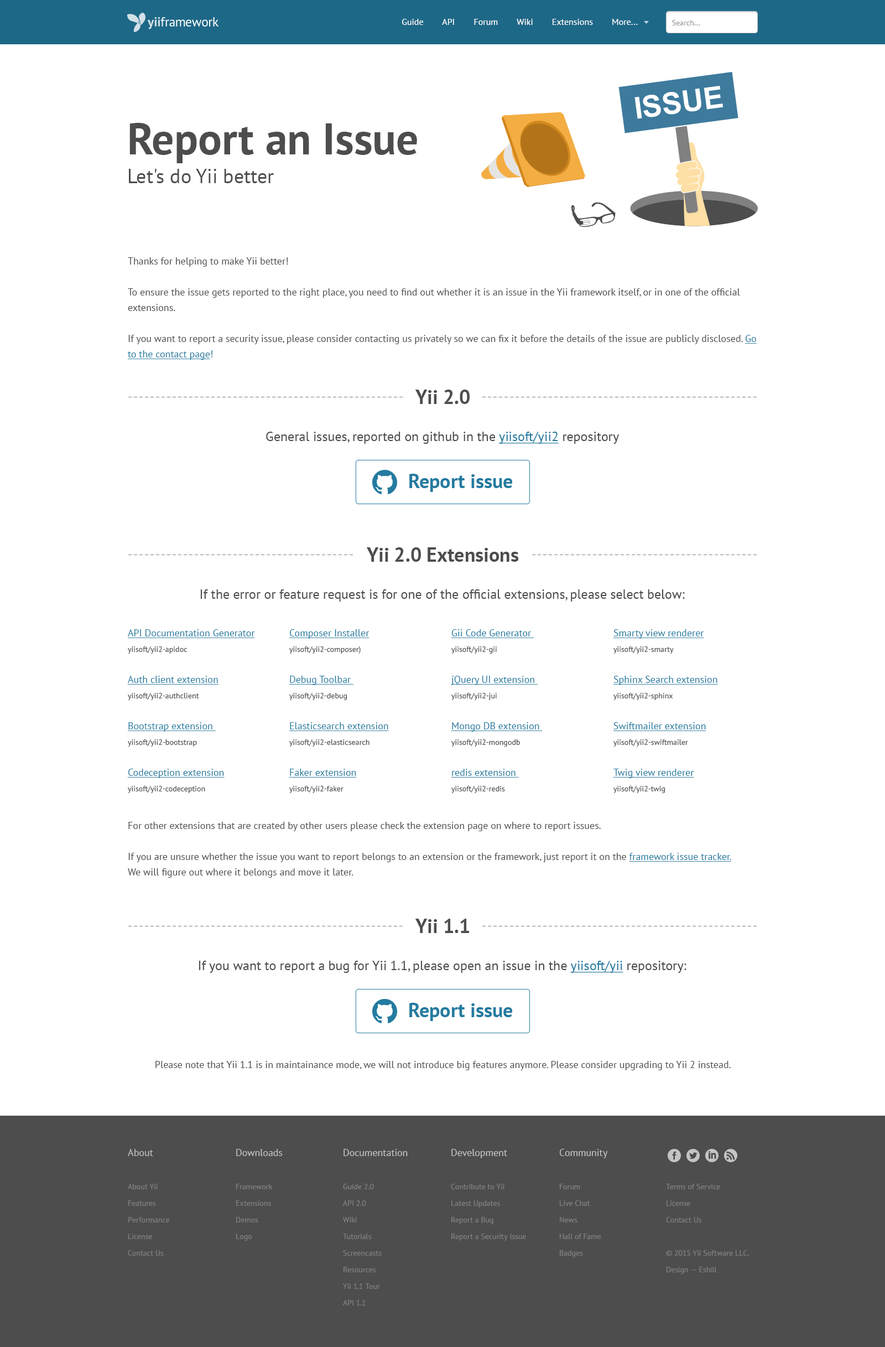
<style>
.page{position:relative;width:885px;height:1347px;background:#ffffff}
.page>*{position:absolute;margin:0}
.t1{font:8.9px "PTSans-Regular";color:#ffffff}
.t2{font:7.7px "PTSans-Regular";color:#999999}
.t3{font:44.3px "PTSans-Bold";color:#4d4d4d}
.t4{font:19.9px "PTSans-Regular";color:#4d4d4d}
.t5{font:10px/15.5px "PTSans-Regular";color:#4d4d4d}
.t6{font:10px/15.5px "PTSans-Regular";color:#247ba0;text-decoration:underline}
.t7{font:10px/15.5px "PTSans-Regular";color:#247ba0}
.t8{font:19.9px "PTSans-Bold";color:#4d4d4d}
.t9{font:13.3px "PTSans-Regular";color:#4d4d4d}
.t10{font:13.3px "PTSans-Regular";color:#247ba0;text-decoration:underline}
.t11{font:19.9px "PTSans-Bold";color:#247ba0}
.t12{font:7.7px/15.5px "PTSans-Regular";color:#4d4d4d}
.t13{font:10px "PTSans-Regular";color:#4d4d4d}
.t14{font:7.7px/16.6px "PTSans-Regular";color:#808080}
.t15{font:10px/16.6px "PTSans-Regular";color:#c4c4c4}
</style>
<div class="page">
<p class="t1" style="left:402px;top:19px;width:236px;height:6px">Guide        API        Forum        Wiki        Extensions        More...</p>
<p class="t2" style="left:672px;top:20px;width:29px;height:5px">Search...</p>
<p class="t3" style="left:129px;top:123px;width:288px;height:40px">Report an Issue</p>
<p class="t4" style="left:129px;top:169px;width:145px;height:14px">Let's do Yii better</p>
<p class="t5" style="left:127px;top:257px;width:630px;height:103px">Thanks for helping to make Yii better!<br><br>To ensure the issue gets reported to the right place, you need to find out whether it is an issue in the Yii framework itself, or in one of the official extensions.<br><br>If you want to report a security issue, please consider contacting us privately so we can fix it before the details of the issue are publicly disclosed. <span class="t6">Go to the contact page</span><span class="t7">!</span></p>
<p class="t8" style="left:415px;top:390px;width:55px;height:14px">Yii 2.0</p>
<p class="t9" style="left:266px;top:432px;width:353px;height:12px">General issues, reported on github in the <span class="t10">yiisoft/yii2</span> repository</p>
<p class="t11" style="left:409px;top:474px;width:103px;height:18px">Report issue</p>
<p class="t8" style="left:366px;top:547px;width:153px;height:15px">Yii 2.0 Extensions</p>
<p class="t9" style="left:200px;top:589px;width:485px;height:12px">If the error or feature request is for one of the official extensions, please select below:</p>
<p class="t6" style="left:127px;top:629px;width:128px;height:164px">API Documentation Generator<br><span class="t12">yiisoft/yii2-apidoc<br><br></span>Auth client extension<span class="t12"> <br>yiisoft/yii2-authclient<br><br></span>Bootstrap extension <br><span class="t12">yiisoft/yii2-bootstrap<br><br></span>Codeception extension <span class="t12">yiisoft/yii2-codeception</span></p>
<p class="t12" style="left:289px;top:629px;width:100px;height:164px"><span class="t6">Composer Installer </span>yiisoft/yii2-composer)<br><span class="t6"><br>Debug Toolbar <br></span>yiisoft/yii2-debug<br><span class="t6"><br>Elasticsearch extension </span>yiisoft/yii2-elasticsearch<br><span class="t6"><br>Faker extension<br></span>yiisoft/yii2-faker</p>
<p class="t12" style="left:451px;top:629px;width:92px;height:164px"><span class="t6">Gii Code Generator <br></span>yiisoft/yii2-gii<br><span class="t6"><br>jQuery UI extension <br></span>yiisoft/yii2-jui<br><span class="t6"><br>Mongo DB extension <br></span>yiisoft/yii2-mongodb<br><span class="t6"><br>redis extension <br></span>yiisoft/yii2-redis</p>
<p class="t12" style="left:613px;top:629px;width:105px;height:164px"><span class="t6">Smarty view renderer<br></span>yiisoft/yii2-smarty<br><span class="t6"><br>Sphinx Search extension<br></span>yiisoft/yii2-sphinx<br><span class="t6"><br>Swiftmailer extension<br></span>yiisoft/yii2-swiftmailer<br><span class="t6"><br>Twig view renderer<br></span>yiisoft/yii2-twig</p>
<p class="t5" style="left:128px;top:822px;width:604px;height:56px">For other extensions that are created by other users please check the extension page on where to report issues.<br><br>If you are unsure whether the issue you want to report belongs to an extension or the framework, just report it on the <span class="t6">framework issue tracker.</span> <br>We will figure out where it belongs and move it later.</p>
<p class="t8" style="left:415px;top:919px;width:54px;height:14px">Yii 1.1</p>
<p class="t9" style="left:199px;top:961px;width:488px;height:12px">If you want to report a bug for Yii 1.1, please open an issue in the <span class="t10">yiisoft/yii</span> repository:</p>
<p class="t11" style="left:409px;top:1003px;width:103px;height:18px">Report issue</p>
<p class="t13" style="left:155px;top:1061px;width:576px;height:9px">Please note that Yii 1.1 is in maintainance mode, we will not introduce big features anymore. Please consider upgrading to Yii 2 instead.</p>
<p class="t14" style="left:128px;top:1149px;width:41px;height:107px"><span class="t15">About<br></span><br>About Yii<br>Features<br>Performance<br>License<br>Contact Us</p>
<p class="t14" style="left:236px;top:1149px;width:47px;height:92px"><span class="t15">Downloads<br></span><br>Framework<br>Extensions<br>Demos<br>Logo</p>
<p class="t14" style="left:343px;top:1149px;width:65px;height:156px"><span class="t15">Documentation<br></span><br>Guide 2.0<br>API 2.0<br>Wiki<br>Tutorials<br>Screencasts<br>Resources<br>Yii 1.1 Tour<br>API 1.1</p>
<p class="t14" style="left:451px;top:1149px;width:75px;height:92px"><span class="t15">Development<br></span><br>Contribute to Yii<br>Latest Updates<br>Report a Bug<br>Report a Security Issue</p>
<p class="t14" style="left:559px;top:1149px;width:49px;height:108px"><span class="t15">Community<br></span><br>Forum<br>Live Chat<br>News<br>Hall of Fame<br>Badges</p>
<p class="t14" style="left:666px;top:1184px;width:83px;height:90px">Terms of Service<br>License<br>Contact Us<br><br>© 2015 Yii Software LLC. Design — Eshill</p>
</div>
